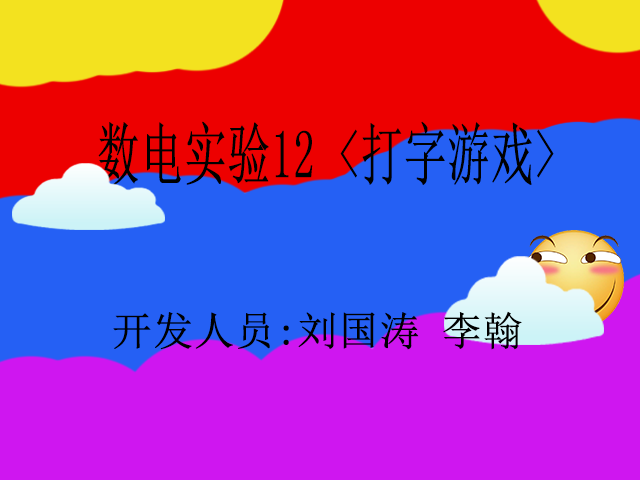
<style>
.page{position:relative;width:640px;height:480px;background:#2560f4}
.page>*{position:absolute;margin:0}
.t1{font:67.9px "SimSun";color:#000000;font-weight:bold;scale:0.62 1}
.t2{font:40px "SimSun";color:#000000;font-weight:bold}
</style>
<div class="page">
<p class="t1" style="left:98px;top:121px;width:456px;height:64px">数电实验12 &lt;打字游戏&gt;</p>
<p class="t2" style="left:113px;top:311px;width:409px;height:39px">开发人员:刘国涛 李翰</p>
</div>
